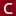
<style>
.page{position:relative;width:16px;height:16px;background:#880015}
.page>*{position:absolute;margin:0}
.t1{font:16px "MyriadPro-Regular";color:#ffffff}
</style>
<div class="page">
<p class="t1" style="left:4px;top:3px;width:9px;height:11px">C</p>
</div>
